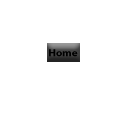
<style>
.page{position:relative;width:114px;height:116px;background:#ffffff}
.page>*{position:absolute;margin:0}
.t1{font:10.3px "MyriadPro-Bold";color:#000000;scale:1.07 1}
</style>
<div class="page">
<p class="t1" style="left:49px;top:49px;width:29px;height:8px">Home</p>
</div>
